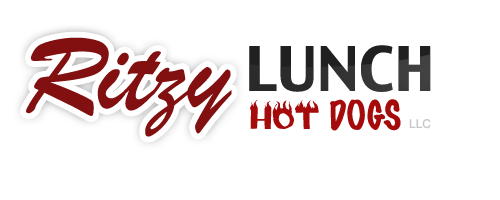
<style>
.page{position:relative;width:500px;height:200px;background:#ffffff}
.page>*{position:absolute;margin:0}
.t1{font:115px "BrushScriptMT";color:#831010}
.t2{font:60px "CharcoalCY";color:#202020}
.t3{font:36px "MarkerFelt-Thin";color:#a50b0b}
.t4{font:36px "Flame";color:#a50b0b}
.t5{font:12px "Helvetica";color:#c7c7c7}
</style>
<div class="page">
<p class="t1" style="left:26px;top:37px;width:206px;height:100px">Ritzy</p>
<p class="t2" style="left:249px;top:45px;width:182px;height:47px">LUNCH</p>
<p class="t3" style="left:250px;top:99px;width:151px;height:32px"><span class="t4">HOT </span>DOGS</p>
<p class="t5" style="left:409px;top:119px;width:22px;height:10px">LLC</p>
</div>
